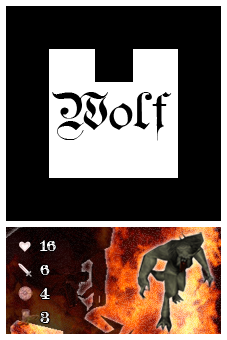
<style>
.page{position:relative;width:227px;height:340px;background:#000000}
.page>*{position:absolute;margin:0}
.t1{font:51.4px "TeutonicNo1-DemiBold";color:#000000}
.t2{font:16px/24px "TeutonicNo4-DemiBold";color:#fefefe}
</style>
<div class="page">
<p class="t1" style="left:52px;top:92px;width:120px;height:49px">Wolf</p>
<p class="t2" style="left:40px;top:240px;width:16px;height:83px">16<br>6<br>4<br>3</p>
</div>
